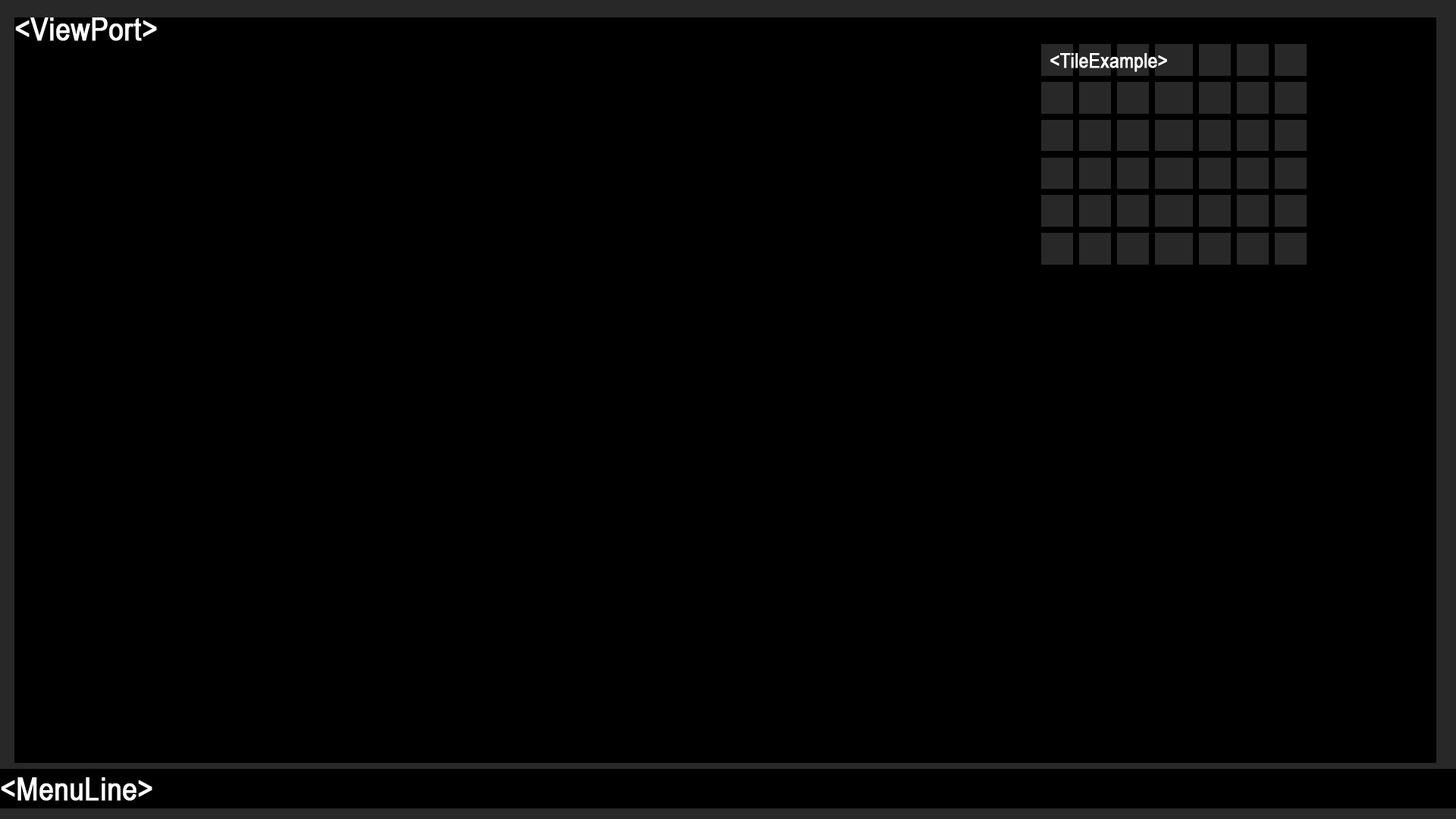
<style>
.page{position:relative;width:1456px;height:819px;background:#000000}
.page>*{position:absolute;margin:0}
.t1{font:31.9px "ArialNarrow";color:#ffffff;font-weight:bold}
.t2{font:20.4px "ArialNarrow";color:#ffffff;font-weight:bold}
</style>
<div class="page">
<p class="t1" style="left:15px;top:17px;width:142px;height:24px">&lt;ViewPort&gt;</p>
<p class="t2" style="left:1050px;top:53px;width:117px;height:19px">&lt;TileExample&gt;</p>
<p class="t1" style="left:1px;top:777px;width:151px;height:24px">&lt;MenuLine&gt;</p>
</div>
